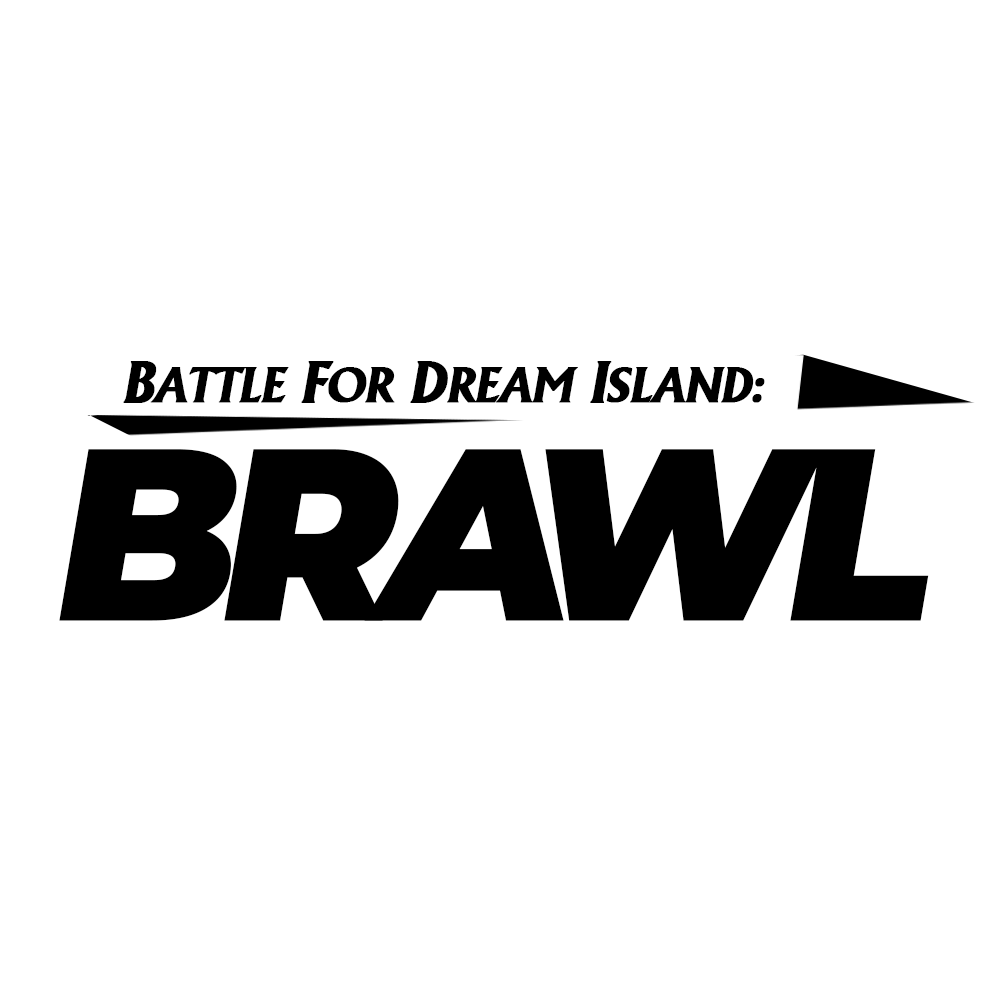
<style>
.page{position:relative;width:1000px;height:1000px;background:#ffffff}
.page>*{position:absolute;margin:0}
.t1{font:49.1px "AndreSF-Bold";letter-spacing:-0.025em;color:#000000;text-transform:uppercase;font-weight:bold;font-style:italic}
.t2{font:57.1px "AndreSF-Bold";letter-spacing:-0.025em;color:#000000;text-transform:uppercase;font-weight:bold;font-style:italic}
.t3{font:244.6px "Montserrat-Black";letter-spacing:-0.075em;color:#000000;font-style:italic;scale:0.96 1}
.t4{font:244.6px "Montserrat-Black";letter-spacing:-0.15em;color:#000000;font-style:italic;scale:0.96 1}
</style>
<div class="page">
<p class="t1" style="left:123px;top:361px;width:642px;height:42px"><span class="t2">B</span>attle<span class="t2"> F</span>or<span class="t2"> D</span>ream<span class="t2"> I</span>sland:</p>
<p class="t3" style="left:59px;top:449px;width:870px;height:172px">BR<span class="t4">A</span>WL</p>
</div>
